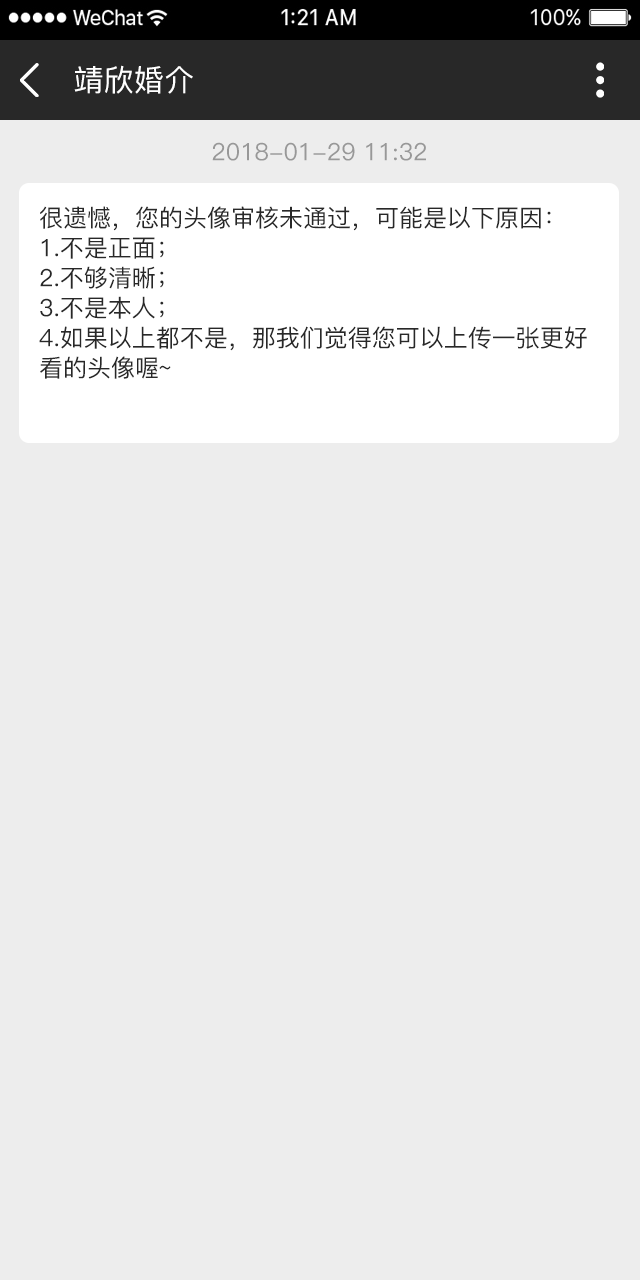
<style>
.page{position:relative;width:640px;height:1280px;background:#ededed}
.page>*{position:absolute;margin:0}
.t1{font:30px "PingFang-SC-Medium";letter-spacing:0.01em;color:#ffffff;text-transform:uppercase}
.t2{font:24px "PingFang-SC-Medium";color:#989898;text-transform:uppercase}
.t3{font:24px/30px "PingFang-SC-Medium";color:#282828;text-transform:uppercase}
</style>
<div class="page">
<p class="t1" style="left:74px;top:65px;width:119px;height:29px">靖欣婚介</p>
<p class="t2" style="left:212px;top:142px;width:214px;height:19px">2018-01-29 11:32</p>
<p class="t3" style="left:39px;top:206px;width:548px;height:173px">很遗憾，您的头像审核未通过，可能是以下原因：<br>1.不是正面；<br>2.不够清晰；<br>3.不是本人；<br>4.如果以上都不是，那我们觉得您可以上传一张更好看的头像喔~</p>
</div>
